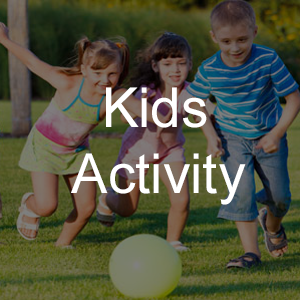
<style>
.page{position:relative;width:300px;height:300px}
.page>*{position:absolute;margin:0}
.t1{font:55px "ArialMT";color:#ffffff}
</style>
<div class="page">
<p class="t1" style="left:71px;top:87px;width:175px;height:118px">Kids <br>Activity</p>
</div>
